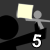
<style>
.page{position:relative;width:50px;height:50px;background:#333333}
.page>*{position:absolute;margin:0}
.t1{font:17.8px "Arial-BoldMT";color:#ffffff}
</style>
<div class="page">
<p class="t1" style="left:32px;top:34px;width:10px;height:14px;rotate:5deg">5</p>
</div>
